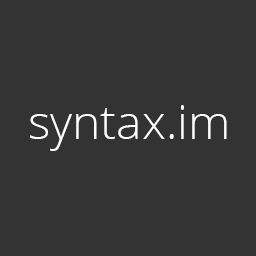
<style>
.page{position:relative;width:256px;height:256px;background:#333333}
.page>*{position:absolute;margin:0}
.t1{font:48px "OpenSans-Light";color:#ffffff}
</style>
<div class="page">
<p class="t1" style="left:30px;top:105px;width:197px;height:46px">syntax.im</p>
</div>
